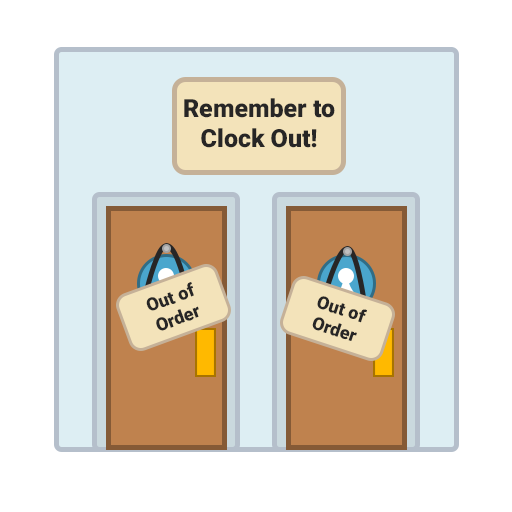
<style>
.page{position:relative;width:512px;height:512px;background:#ffffff}
.page>*{position:absolute;margin:0}
.t1{font:25px "Roboto-Black";color:#272626}
.t2{font:18px "Roboto-Black";color:#272626}
</style>
<div class="page">
<p class="t1" style="left:184px;top:98px;width:151px;height:50px;text-align:center">Remember to Clock Out!</p>
<p class="t2" style="left:146px;top:282px;width:53px;height:49px;rotate:-20deg">Out of Order</p>
<p class="t2" style="left:312px;top:296px;width:55px;height:45px;rotate:18deg">Out of Order</p>
</div>
